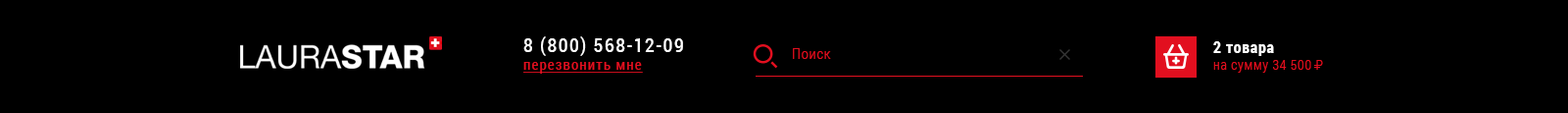
<style>
.page{position:relative;width:1568px;height:113px;background:#000000}
.page>*{position:absolute;margin:0}
.t1{font:19.6px "RobotoCondensed-Regular";letter-spacing:0.075em;color:#ffffff;text-transform:uppercase}
.t2{font:13.7px/13.7px "RobotoCondensed-Light";letter-spacing:0.05em;color:#e20f1f}
.t3{font:15.7px/13.7px "RobotoCondensed-Bold";letter-spacing:0.05em;color:#ffffff}
.t4{font:14.7px "RobotoCondensed-Light";letter-spacing:0.05em;color:#e20f1f}
.t5{font:14.7px "RobotoCondensed-Regular";letter-spacing:0.075em;color:#e21020;text-decoration:underline}
</style>
<div class="page">
<p class="t1" style="left:523px;top:36px;width:160px;height:20px">8 (800) 568-12-09</p>
<p class="t2" style="left:1213px;top:41px;width:110px;height:32px"><span class="t3">2 товара<br></span>на сумму 34 500 Р</p>
<p class="t4" style="left:793px;top:48px;width:38px;height:11px">Поиск</p>
<p class="t5" style="left:523px;top:62px;width:120px;height:12px">перезвонить мне</p>
</div>
